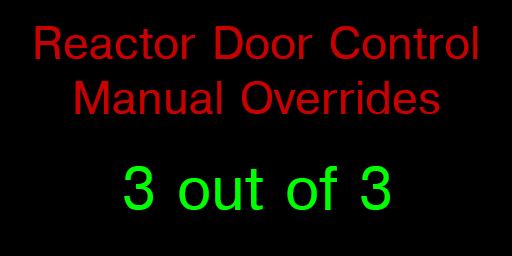
<style>
.page{position:relative;width:512px;height:256px;background:#000000}
.page>*{position:absolute;margin:0}
.t1{font:46px "Helvetica";color:#c80000}
.t2{font:60px "Helvetica";color:#00ff00}
</style>
<div class="page">
<p class="t1" style="left:35px;top:26px;width:443px;height:88px;text-align:center">Reactor Door Control<br>Manual Overrides</p>
<p class="t2" style="left:124px;top:166px;width:266px;height:44px">3 out of 3</p>
</div>
